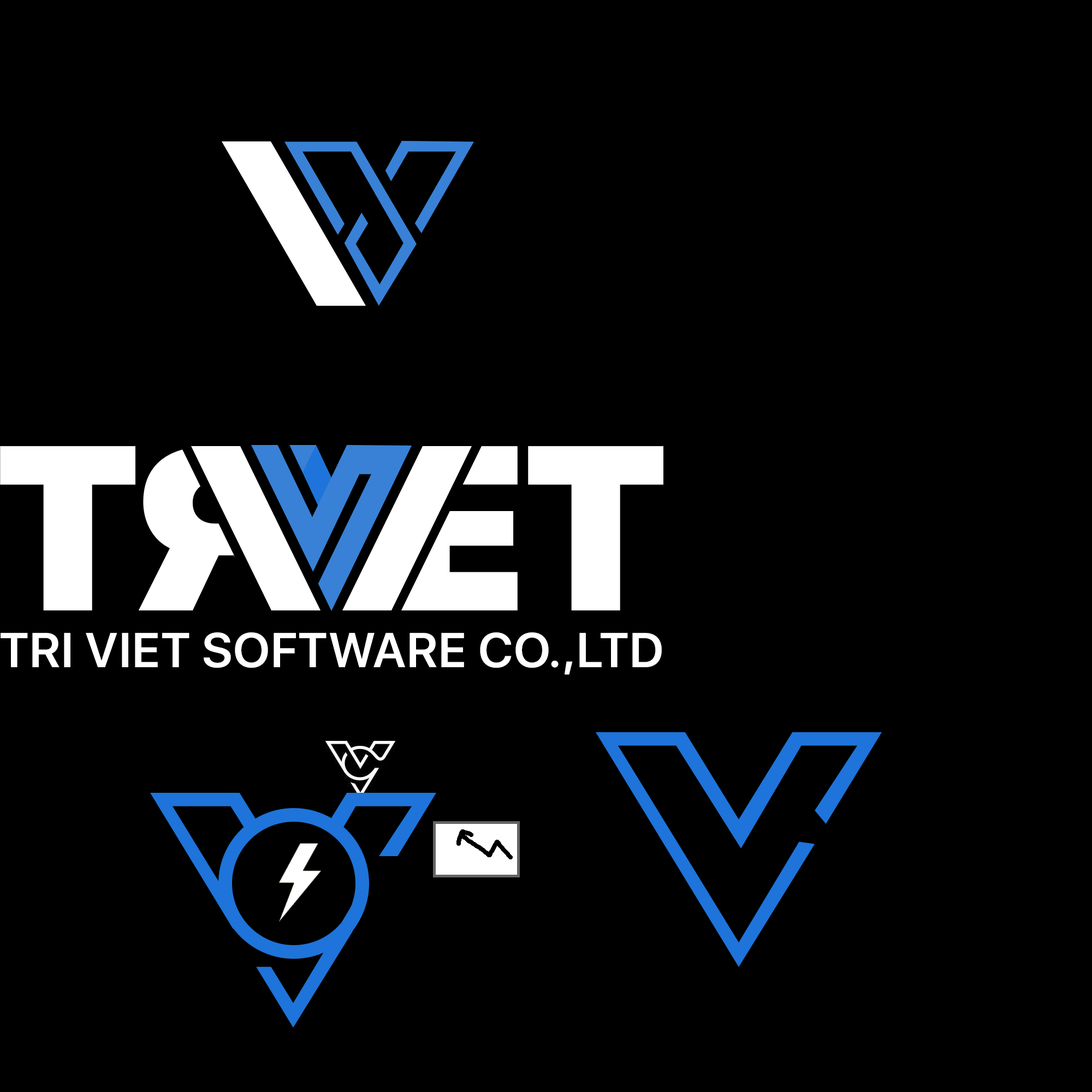
<style>
.page{position:relative;width:1092px;height:1092px;background:#000000}
.page>*{position:absolute;margin:0}
.t1{font:233.1px "SFProDisplay-Black";letter-spacing:0.02em;color:#ffffff}
.t2{font:48.6px "SFProDisplay-Semibold";letter-spacing:0.02em;color:#ffffff}
</style>
<div class="page">
<p class="t1" style="left:0px;top:446px;width:135px;height:164px">T</p>
<p class="t1" style="left:528px;top:446px;width:135px;height:164px">T</p>
<p class="t2" style="left:1px;top:632px;width:661px;height:43px">TRI VIET SOFTWARE CO.,LTD</p>
</div>
